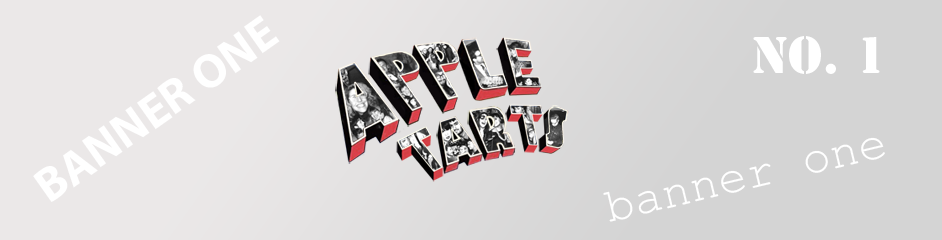
<style>
.page{position:relative;width:942px;height:240px;background:#d4d4d4}
.page>*{position:absolute;margin:0}
.t1{font:48px "MyriadPro-Bold";color:#ffffff}
.t2{font:48px "StencilStd";color:#ffffff}
.t3{font:48px "CourierNewPSMT";color:#ffffff}
</style>
<div class="page">
<p class="t1" style="left:33px;top:15px;width:247px;height:187px;rotate:-35deg">BANNER ONE</p>
<p class="t2" style="left:753px;top:36px;width:127px;height:38px">No. 1</p>
<p class="t3" style="left:603px;top:137px;width:282px;height:85px;rotate:-13deg">banner one</p>
</div>
